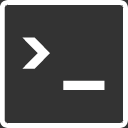
<style>
.page{position:relative;width:128px;height:128px;background:#333333}
.page>*{position:absolute;margin:0}
.t1{font:69.9px "Poppins-SemiBold";color:#ffffff}
</style>
<div class="page">
<p class="t1" style="left:22px;top:37px;width:83px;height:54px">&gt;_</p>
</div>
